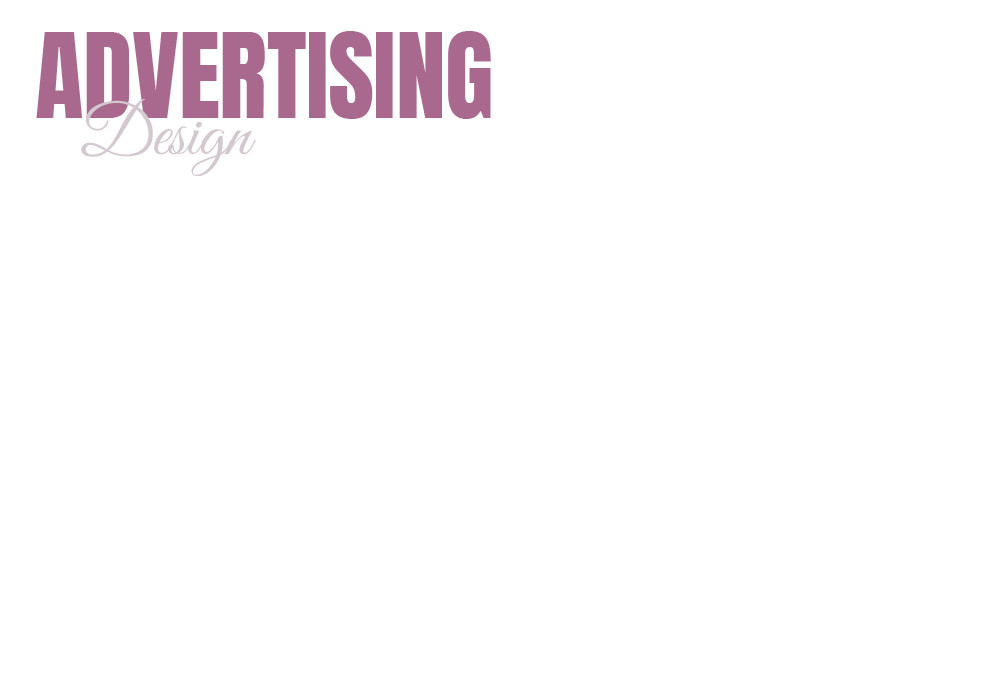
<style>
.page{position:relative;width:1000px;height:700px;background:#ffffff}
.page>*{position:absolute;margin:0}
.t1{font:100px "Anton-Regular";letter-spacing:-0.005em;color:#a9698f}
</style>
<div class="page">
<p class="t1" style="left:36px;top:31px;width:455px;height:88px">ADVERTISING</p>
</div>
